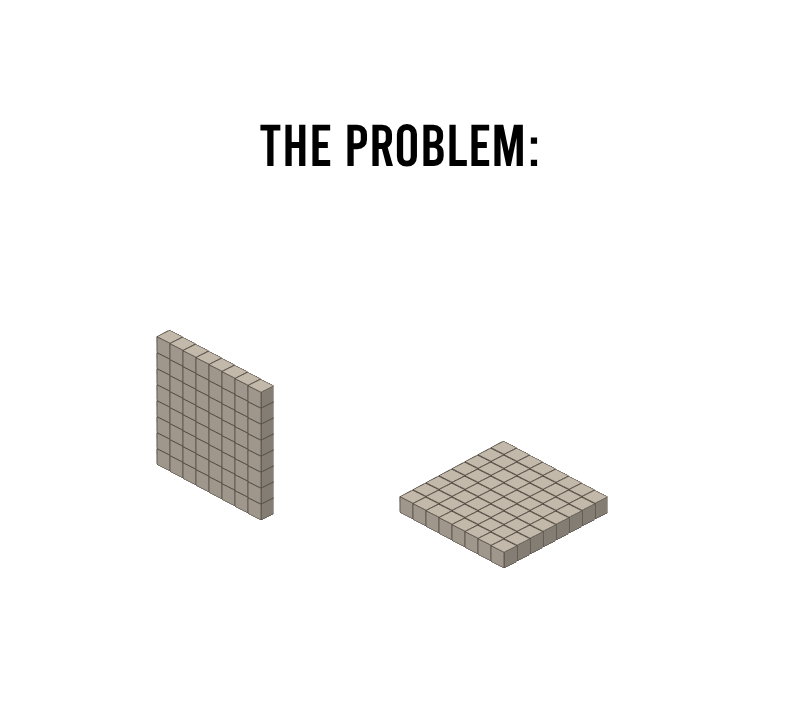
<style>
.page{position:relative;width:798px;height:721px;background:#ffffff}
.page>*{position:absolute;margin:0}
.t1{font:59px "Bebas-Regular";color:#000000}
</style>
<div class="page">
<p class="t1" style="left:260px;top:124px;width:278px;height:43px">THE PROBLEM:</p>
</div>
